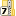
<style>
.page{position:relative;width:16px;height:16px}
.page>*{position:absolute;margin:0}
.t1{font:8px "Tahoma-Bold";color:#000000}
</style>
<div class="page">
<p class="t1" style="left:2px;top:8px;width:5px;height:6px">7</p>
</div>
